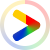
<style>
.page{position:relative;width:50px;height:50px;background:#ffffff}
.page>*{position:absolute;margin:0}
.t1{font:48px "Fredoka-Bold"}
</style>
<div class="page">
<p class="t1" style="left:12px;top:9px;width:29px;height:32px">&gt;</p>
</div>
